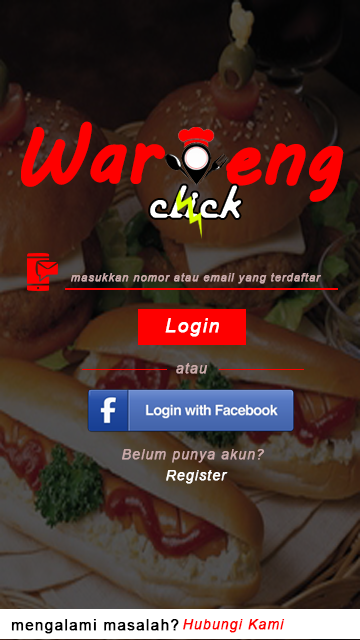
<style>
.page{position:relative;width:360px;height:640px}
.page>*{position:absolute;margin:0}
.t1{font:75.4px "MVBoli";color:#fe0000;font-weight:bold}
.t2{font:50.3px "HarlowSolid";font-weight:bold}
.t3{font:11.1px "Arial-ItalicMT";letter-spacing:0.06em;color:#caaaaa;font-weight:bold}
.t4{font:19.4px "Arial-ItalicMT";letter-spacing:0.06em;color:#ffffff;font-weight:bold}
.t5{font:13.9px "Arial-ItalicMT";letter-spacing:0.06em;color:#caaaaa;font-weight:bold}
.t6{font:13.9px "Arial-ItalicMT";letter-spacing:0.06em;color:#ffffff;font-weight:bold}
.t7{font:15.3px "ArialMT";letter-spacing:0.06em;color:#000000;font-weight:bold}
.t8{font:13.9px "Arial-ItalicMT";letter-spacing:0.06em;color:#ff0000;font-weight:bold}
</style>
<div class="page">
<p class="t1" style="left:21px;top:121px;width:144px;height:66px">War</p>
<p class="t1" style="left:226px;top:143px;width:118px;height:59px">eng</p>
<p class="t2" style="left:148px;top:183px;width:95px;height:37px">click</p>
<p class="t3" style="left:71px;top:273px;width:250px;height:11px">masukkan nomor atau email yang terdaftar</p>
<p class="t4" style="left:165px;top:318px;width:54px;height:19px">Login</p>
<p class="t5" style="left:176px;top:363px;width:32px;height:11px">atau</p>
<p class="t5" style="left:122px;top:449px;width:143px;height:14px">Belum punya akun?</p>
<p class="t6" style="left:166px;top:470px;width:62px;height:14px">Register</p>
<p class="t7" style="left:11px;top:619px;width:168px;height:15px">mengalami masalah?</p>
<p class="t8" style="left:183px;top:619px;width:102px;height:14px">Hubungi Kami</p>
</div>
